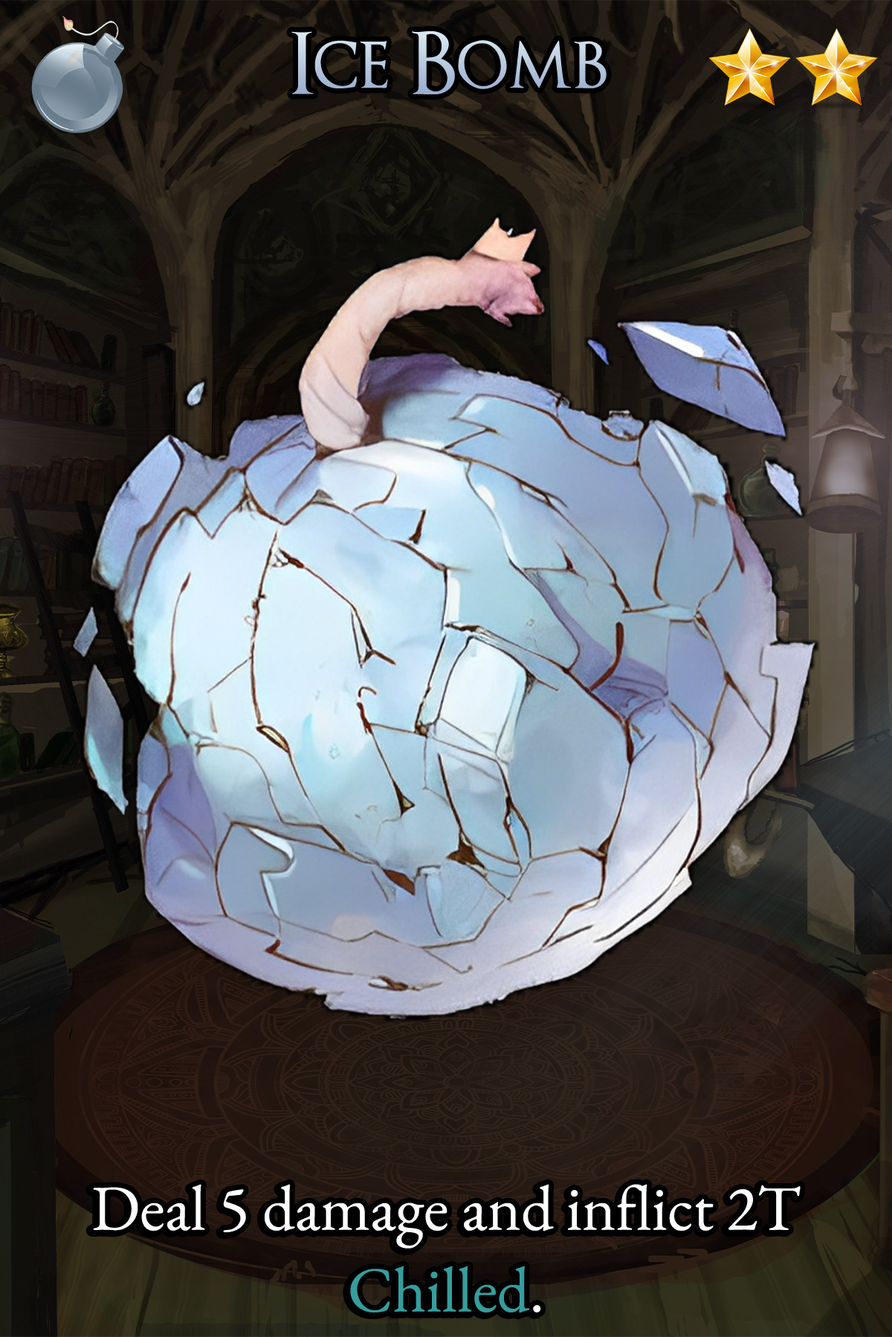
<style>
.page{position:relative;width:892px;height:1337px}
.page>*{position:absolute;margin:0}
.t1{font:144.1px "OptimusPrinceps"}
.t2{font:110px "EBGaramond-Regular";color:#ffffff}
.t3{font:110px "EBGaramond-Regular";color:#359e9d}
</style>
<div class="page">
<p class="t1" style="left:291px;top:31px;width:315px;height:63px">Ice Bomb</p>
<p class="t2" style="left:93px;top:1184px;width:707px;height:130px">Deal 5 damage and inflict 2T <span class="t3">Chilled</span>.</p>
</div>
